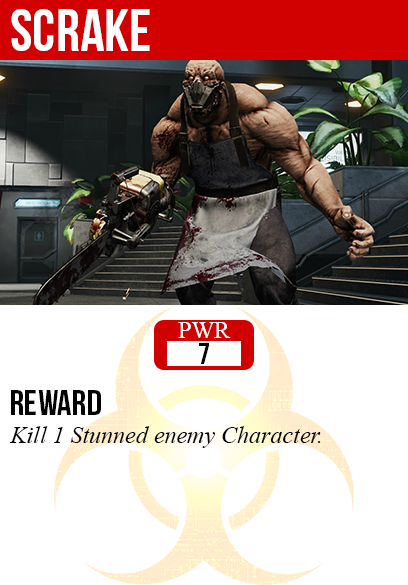
<style>
.page{position:relative;width:408px;height:585px;background:#ffffff}
.page>*{position:absolute;margin:0}
.t1{font:60px "BebasNeue";color:#ffffff}
.t2{font:24px "TimesNewRomanPSMT";color:#ffffff}
.t3{font:30px "BebasNeue";color:#000000}
.t4{font:36px "BebasNeue";color:#000000}
.t5{font:24px "TimesNewRomanPS-ItalicMT";color:#000000}
</style>
<div class="page">
<p class="t1" style="left:11px;top:9px;width:139px;height:42px">scrake</p>
<p class="t2" style="left:178px;top:322px;width:53px;height:16px">PWR</p>
<p class="t3" style="left:199px;top:343px;width:10px;height:21px">7</p>
<p class="t4" style="left:11px;top:390px;width:90px;height:25px">reward</p>
<p class="t5" style="left:9px;top:426px;width:312px;height:22px">Kill 1 Stunned enemy Character.</p>
</div>
